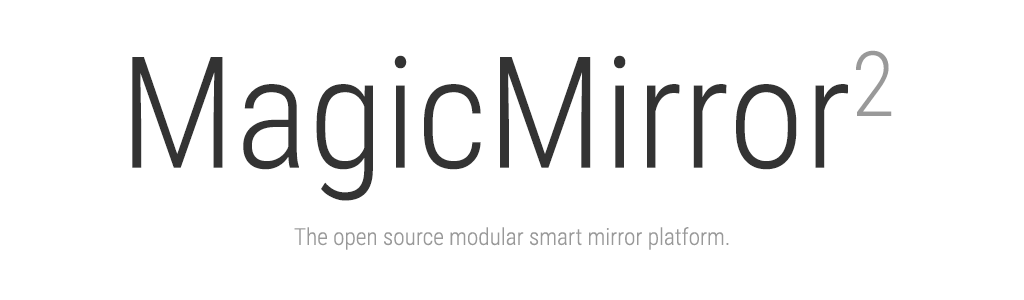
<style>
.page{position:relative;width:1024px;height:300px;background:#ffffff}
.page>*{position:absolute;margin:0}
.t1{font:155.3px "RobotoCondensed-Light";color:#333333}
.t2{font:155.3px "RobotoCondensed-Light";color:#999999}
.t3{font:39.9px "RobotoCondensed-Light";color:#999999}
</style>
<div class="page">
<p class="t1" style="left:132px;top:50px;width:760px;height:151px">MagicMirror<span class="t2">2</span></p>
<p class="t3" style="left:294px;top:227px;width:435px;height:23px">The open source modular smart mirror platform.</p>
</div>
